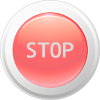
<style>
.page{position:relative;width:100px;height:100px}
.page>*{position:absolute;margin:0}
.t1{font:21px "NanumGothicCoding";color:#dcdcdc;font-weight:bold;scale:1.1 1}
</style>
<div class="page">
<p class="t1" style="left:26px;top:42px;width:48px;height:16px">STOP</p>
</div>
